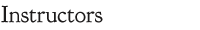
<style>
.page{position:relative;width:200px;height:30px;background:#ffffff}
.page>*{position:absolute;margin:0}
.t1{font:24px "GoudyBookletter1911";color:#1d1b1b}
</style>
<div class="page">
<p class="t1" style="left:1px;top:5px;width:102px;height:18px">Instructors</p>
</div>
